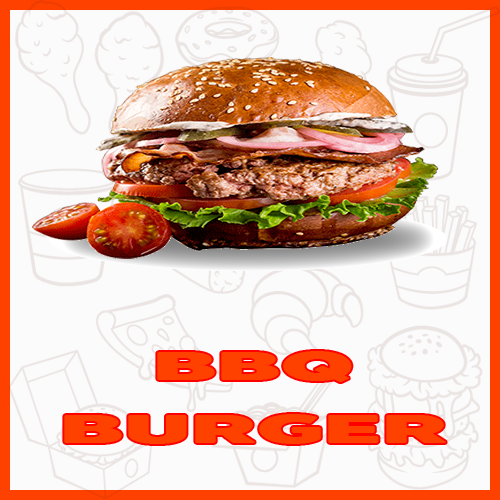
<style>
.page{position:relative;width:500px;height:500px;background:#fbfbfb}
.page>*{position:absolute;margin:0}
.t1{font:40.5px "BoonTook-Mon-Ultra";color:#ff4100;scale:2.16 1}
</style>
<div class="page">
<p class="t1" style="left:157px;top:351px;width:195px;height:31px">BBQ</p>
<p class="t1" style="left:64px;top:414px;width:382px;height:30px">BURGER</p>
</div>
